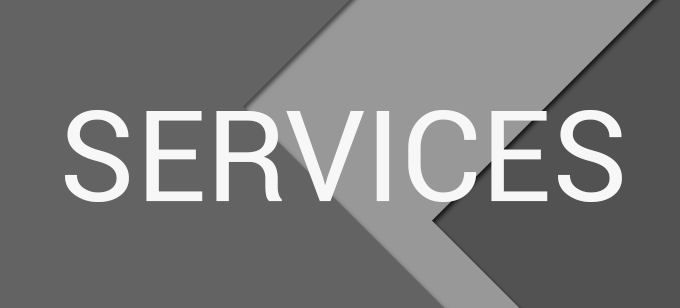
<style>
.page{position:relative;width:680px;height:308px;background:#636363}
.page>*{position:absolute;margin:0}
.t1{font:126.8px "Roboto-Regular";color:#f7f7f7}
</style>
<div class="page">
<p class="t1" style="left:65px;top:110px;width:557px;height:92px">SERVICES</p>
</div>
